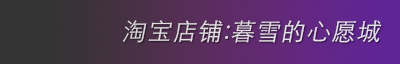
<style>
.page{position:relative;width:400px;height:64px}
.page>*{position:absolute;margin:0}
.t1{font:24px "STXihei";letter-spacing:0.05em;color:#e4dfe7;font-style:italic}
</style>
<div class="page">
<p class="t1" style="left:122px;top:20px;width:260px;height:23px">淘宝店铺:暮雪的心愿城</p>
</div>
